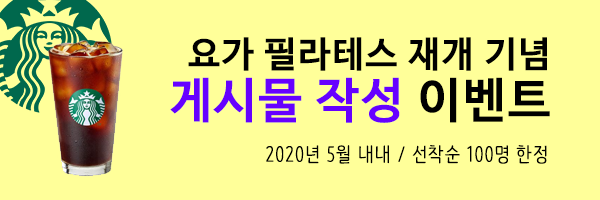
<style>
.page{position:relative;width:600px;height:200px;background:#ffff99}
.page>*{position:absolute;margin:0}
.t1{font:36px/40px "NanumBarunGothicOTFBold";letter-spacing:0.04em;color:#000000}
.t2{font:48px/50px "NanumBarunGothicOTFBold";letter-spacing:0.04em;color:#6600ff}
.t3{font:48px/50px "NanumBarunGothicOTFBold";letter-spacing:0.04em;color:#000000}
.t4{font:20px "NanumBarunpen";letter-spacing:0.04em;color:#000000}
</style>
<div class="page">
<p class="t1" style="left:170px;top:37px;width:380px;height:86px;text-align:right">요가 필라테스 재개 기념<br><span class="t2">게시물 작성</span><span class="t3"> 이벤트</span></p>
<p class="t4" style="left:266px;top:145px;width:281px;height:19px">2020년 5월 내내 / 선착순 100명 한정</p>
</div>
